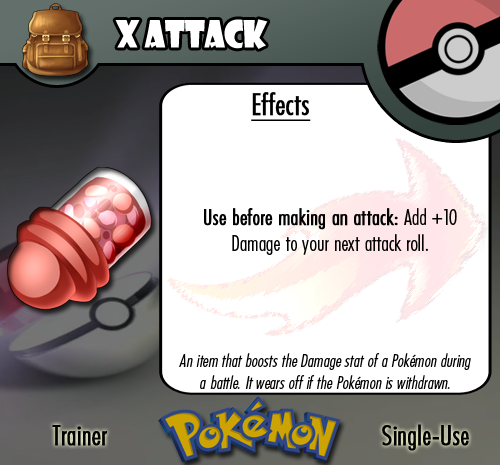
<style>
.page{position:relative;width:500px;height:465px;background:#ffffff}
.page>*{position:absolute;margin:0}
.t1{font:36.7px "ShowcardGothic-Reg";letter-spacing:-0.025em;color:#ffffff;scale:0.91 1}
.t2{font:22.2px "FuturaCondensedBQ-Light";color:#010101}
.t3{font:27.8px "FuturaCondensedBQ-Light";color:#010101;font-weight:bold}
.t4{font:30.6px "FuturaCondensedBQ-Light";color:#010101;font-weight:bold;text-decoration:underline}
.t5{font:22.2px "FuturaCondensedBQ-Light";color:#010101;font-weight:bold}
.t6{font:18.1px "FuturaCondensedBQ-Light";color:#010101;font-style:italic}
</style>
<div class="page">
<p class="t1" style="left:115px;top:19px;width:153px;height:30px">X Attack</p>
<p class="t2" style="left:204px;top:92px;width:253px;height:163px"><span class="t3">  </span><span class="t4">Effects<br><br><br><br><br><br><br></span><span class="t5">Use before making an attack: </span>Add +10 Damage to your next attack roll.</p>
<p class="t6" style="left:179px;top:353px;width:292px;height:36px;text-align:center">An item that boosts the Damage stat of a Pokémon during a battle. It wears off if the Pokémon is withdrawn.</p>
<p class="t3" style="left:52px;top:425px;width:55px;height:21px">Trainer</p>
<p class="t3" style="left:382px;top:424px;width:87px;height:27px">Single-Use</p>
</div>
